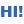
<style>
.page{position:relative;width:24px;height:24px;background:#ffffff}
.page>*{position:absolute;margin:0}
.t1{font:15px "Arial-Black";color:#2f65b2}
</style>
<div class="page">
<p class="t1" style="left:1px;top:6px;width:22px;height:11px">HI!</p>
</div>
